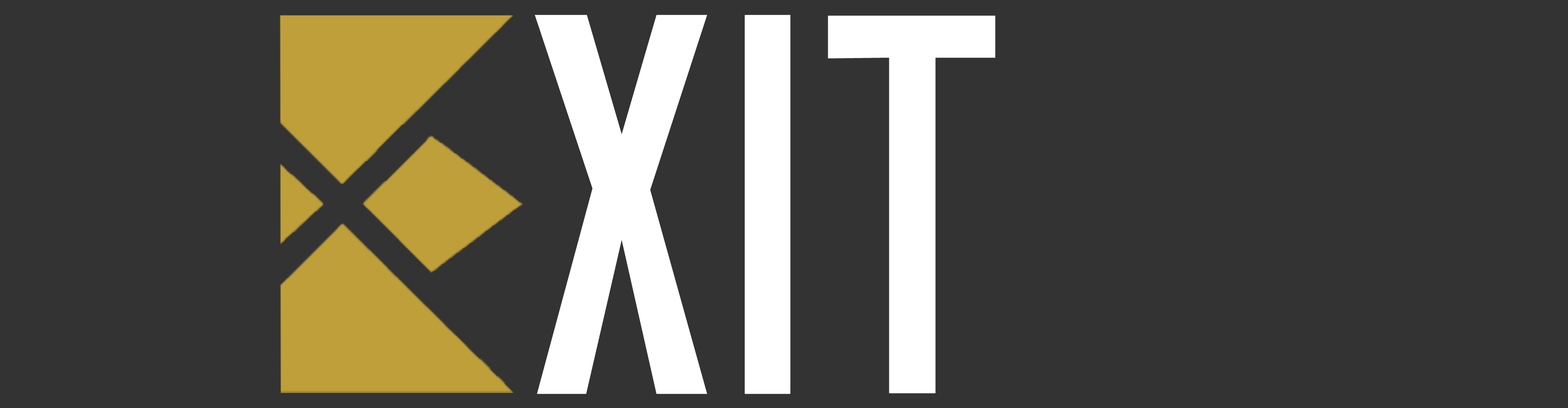
<style>
.page{position:relative;width:1568px;height:408px;background:#333333}
.page>*{position:absolute;margin:0}
.t1{font:711.4px "Searocks-Regular";color:#ffffff}
</style>
<div class="page">
<p class="t1" style="left:535px;top:15px;width:460px;height:380px">XIT</p>
</div>
